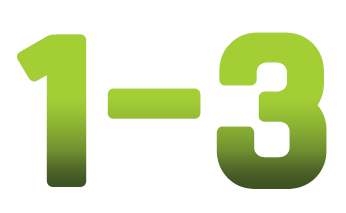
<style>
.page{position:relative;width:346px;height:213px;background:#ffffff}
.page>*{position:absolute;margin:0}
.t1{font:182.7px "TTTogether"}
</style>
<div class="page">
<p class="t1" style="left:17px;top:32px;width:310px;height:157px">1-3</p>
</div>
